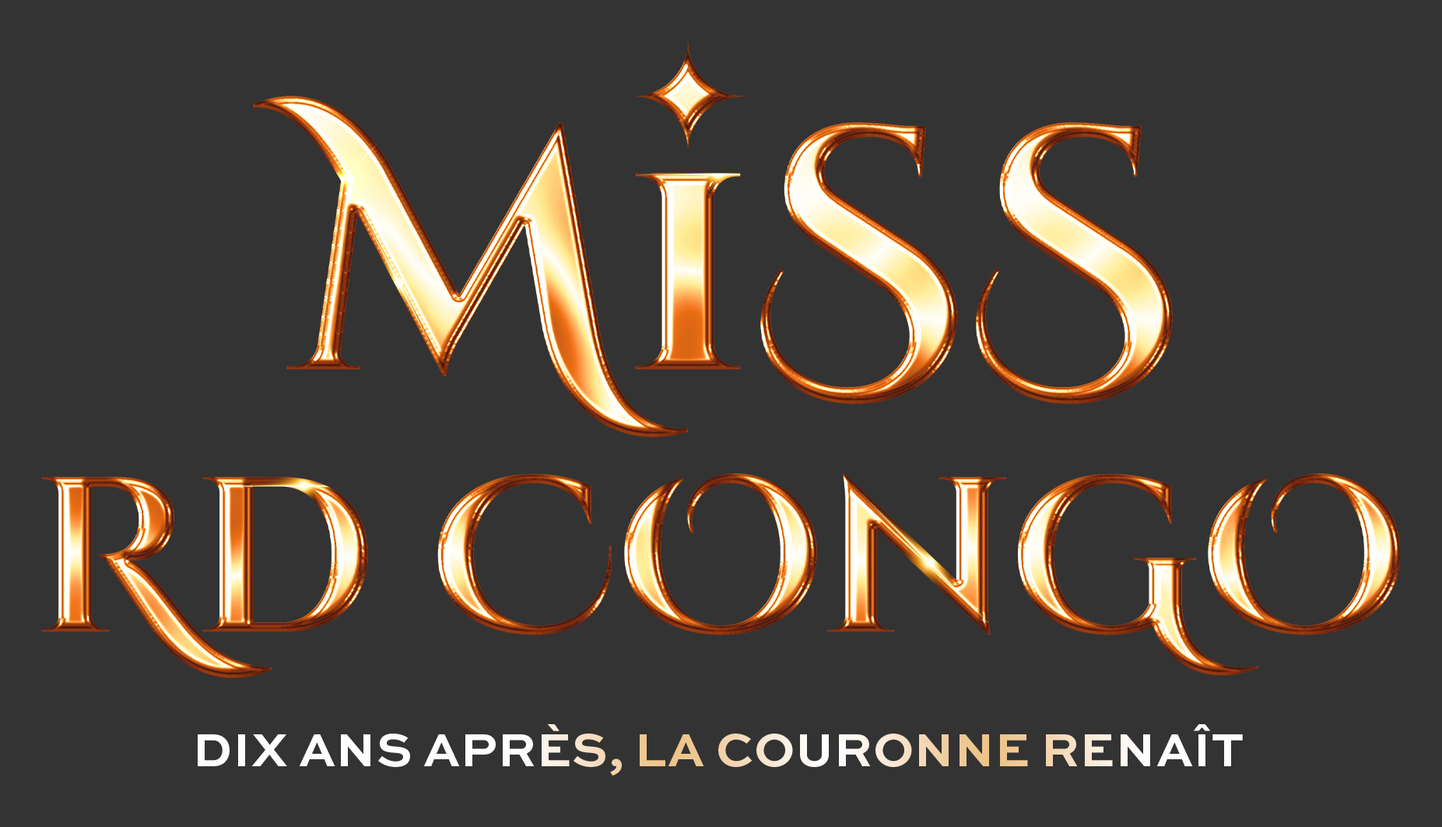
<style>
.page{position:relative;width:1442px;height:827px;background:#333333}
.page>*{position:absolute;margin:0}
.t1{font:48.7px "SweetSansPro-Bold";text-transform:uppercase}
</style>
<div class="page">
<p class="t1" style="left:198px;top:724px;width:1045px;height:51px">dix ans après, la couronne renaît</p>
</div>
